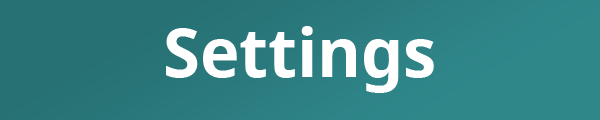
<style>
.page{position:relative;width:600px;height:120px}
.page>*{position:absolute;margin:0}
.t1{font:66.7px "NotoSans-Bold";color:#ffffff}
</style>
<div class="page">
<p class="t1" style="left:166px;top:26px;width:268px;height:67px">Settings</p>
</div>
